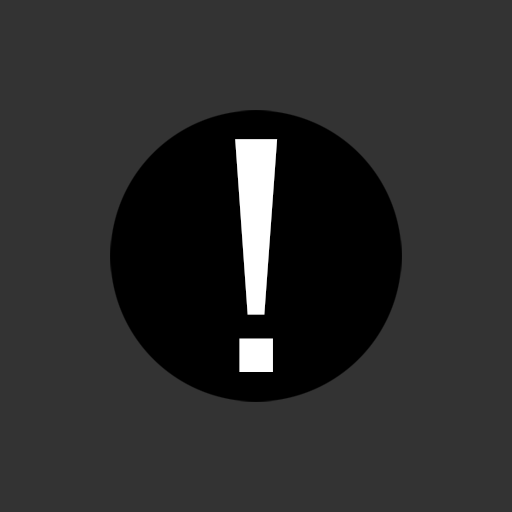
<style>
.page{position:relative;width:512px;height:512px;background:#333333}
.page>*{position:absolute;margin:0}
.t1{font:326.8px "DINAlternate-Bold";color:#ffffff}
</style>
<div class="page">
<p class="t1" style="left:235px;top:139px;width:43px;height:233px">!</p>
</div>
